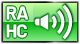
<style>
.page{position:relative;width:80px;height:44px}
.page>*{position:absolute;margin:0}
.t1{font:18.7px "Barlow-Bold";letter-spacing:-0.05em;color:#ffffff}
</style>
<div class="page">
<p class="t1" style="left:6px;top:6px;width:23px;height:14px">RA</p>
<p class="t1" style="left:6px;top:6px;width:23px;height:14px">RA</p>
<p class="t1" style="left:6px;top:24px;width:21px;height:14px">HC</p>
<p class="t1" style="left:6px;top:24px;width:21px;height:14px">HC</p>
</div>
